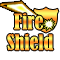
<style>
.page{position:relative;width:60px;height:60px;background:#ffffff}
.page>*{position:absolute;margin:0}
.t1{font:20px "BernardMT-Condensed"}
</style>
<div class="page">
<p class="t1" style="left:14px;top:13px;width:29px;height:17px">Fire</p>
<p class="t1" style="left:7px;top:33px;width:47px;height:18px">Shield</p>
</div>
